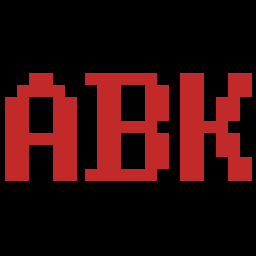
<style>
.page{position:relative;width:256px;height:256px;background:#000000}
.page>*{position:absolute;margin:0}
.t1{font:193px "Code";color:#c22929}
</style>
<div class="page">
<p class="t1" style="left:5px;top:73px;width:72px;height:108px">A</p>
<p class="t1" style="left:85px;top:73px;width:84px;height:108px">B</p>
<p class="t1" style="left:180px;top:73px;width:72px;height:108px">K</p>
</div>
